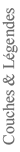
<style>
.page{position:relative;width:20px;height:152px;background:#ffffff}
.page>*{position:absolute;margin:0}
.t1{font:16px "TimesNewRomanPSMT";color:#686868}
</style>
<div class="page">
<p class="t1" style="left:2px;top:8px;width:16px;height:137px;rotate:-90deg">Couches &amp; Légendes</p>
</div>
